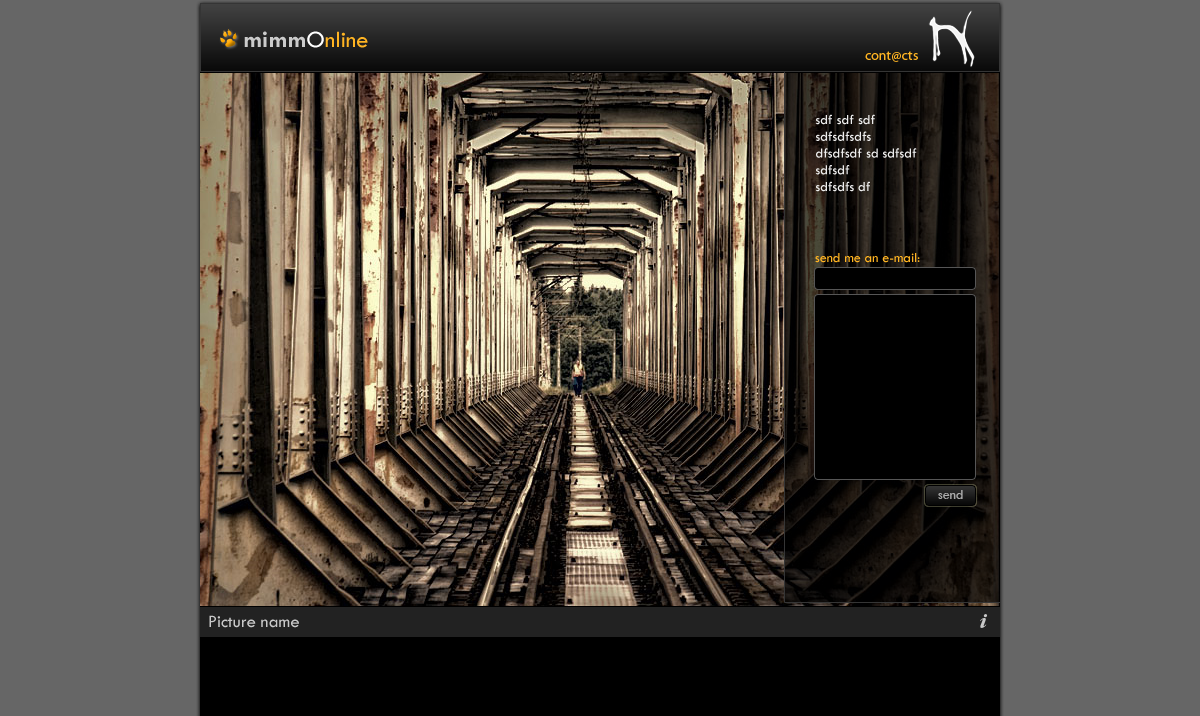
<style>
.page{position:relative;width:1200px;height:716px;background:#666666}
.page>*{position:absolute;margin:0}
.t1{font:24px "TwCenMT-Regular";color:#ffb422}
.t2{font:24px "TwCenMT-Bold";color:#cbcbcb}
.t3{font:24px "TwCenMT-Regular";color:#ffffff}
.t4{font:14px "MyriadPro-Regular";color:#ffb422}
.t5{font:14px "TwCenMT-Regular";color:#eeeeee}
.t6{font:14px "TwCenMT-Regular";color:#ffb422}
.t7{font:14px "TwCenMT-Regular";color:#ababab}
.t8{font:18px "TwCenMT-Regular";color:#c9c9c9}
</style>
<div class="page">
<p class="t1" style="left:244px;top:31px;width:124px;height:17px"><span class="t2">mimm</span><span class="t3">O</span>nline</p>
<p class="t4" style="left:865px;top:51px;width:53px;height:11px">cont@cts</p>
<p class="t5" style="left:815px;top:114px;width:102px;height:78px">sdf sdf sdf<br>sdfsdfsdfs<br>dfsdfsdf sd sdfsdf<br>sdfsdf<br>sdfsdfs df</p>
<p class="t6" style="left:815px;top:253px;width:105px;height:10px">send me an e-mail:</p>
<p class="t7" style="left:938px;top:490px;width:25px;height:9px">send</p>
<p class="t8" style="left:209px;top:615px;width:90px;height:13px">Picture name</p>
</div>
